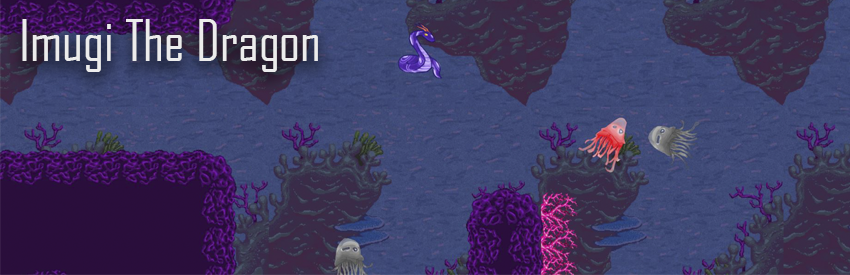
<style>
.page{position:relative;width:850px;height:275px}
.page>*{position:absolute;margin:0}
.t1{font:55.2px "AgencyFB-Reg";color:#ececec}
</style>
<div class="page">
<p class="t1" style="left:22px;top:19px;width:296px;height:53px">Imugi The Dragon</p>
</div>
